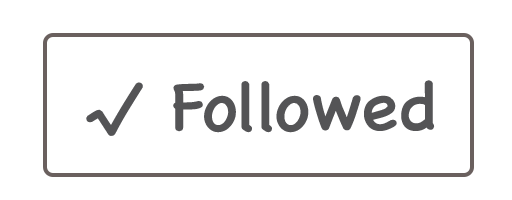
<style>
.page{position:relative;width:512px;height:200px;background:#ffffff}
.page>*{position:absolute;margin:0}
.t1{font:70px "ChalkboardSE-Regular";color:#545456}
</style>
<div class="page">
<p class="t1" style="left:86px;top:82px;width:57px;height:54px;rotate:12deg">√</p>
<p class="t1" style="left:173px;top:80px;width:262px;height:53px">Followed</p>
</div>
